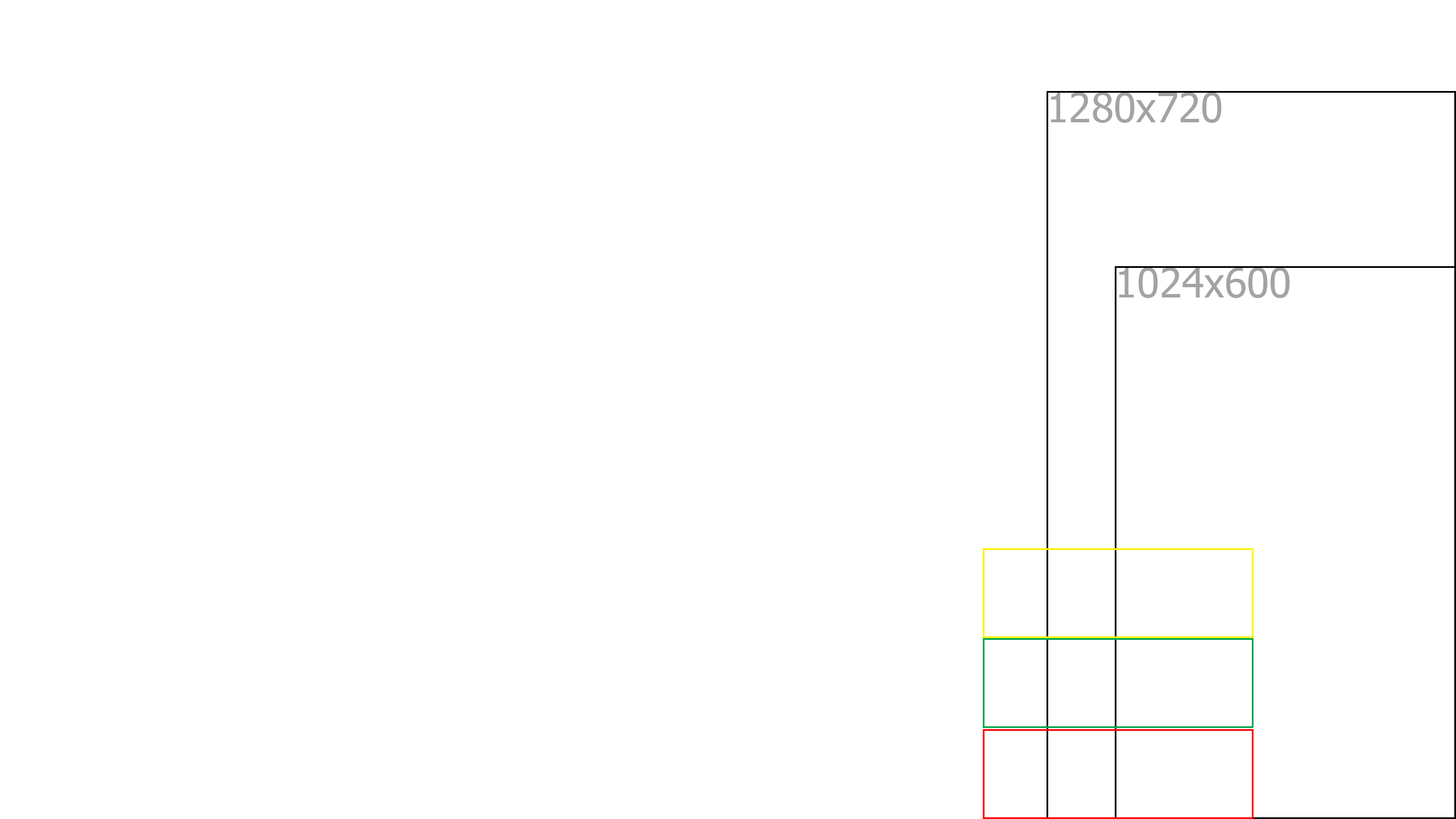
<style>
.page{position:relative;width:1456px;height:819px;background:#ffffff}
.page>*{position:absolute;margin:0}
.t1{font:40.9px "Tahoma";color:#a3a3a3}
</style>
<div class="page">
<p class="t1" style="left:1051px;top:92px;width:171px;height:31px">1280x720</p>
<p class="t1" style="left:1119px;top:267px;width:171px;height:31px">1024x600</p>
</div>
